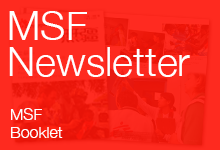
<style>
.page{position:relative;width:220px;height:150px}
.page>*{position:absolute;margin:0}
.t1{font:40px/36px "HelveticaNeue-Light";color:#ffffff}
.t2{font:16px/18px "HelveticaNeue-Light";color:#ffffff}
</style>
<div class="page">
<p class="t1" style="left:9px;top:11px;width:181px;height:66px">MSF <br>Newsletter</p>
<p class="t2" style="left:11px;top:108px;width:52px;height:30px">MSF<br>Booklet</p>
</div>
